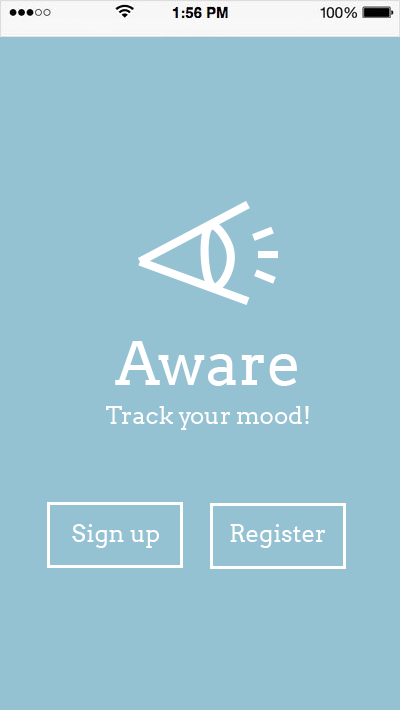
<style>
.page{position:relative;width:400px;height:710px;background:#95c2d3}
.page>*{position:absolute;margin:0}
.t1{font:60px "Arvo";color:#ffffff}
.t2{font:24px "Arvo";color:#ffffff}
.t3{font:18px "Arvo";color:#ffffff}
</style>
<div class="page">
<p class="t1" style="left:115px;top:341px;width:182px;height:45px">Aware</p>
<p class="t2" style="left:106px;top:406px;width:203px;height:24px"><span class="t3"> </span>Track your mood!</p>
<p class="t2" style="left:72px;top:524px;width:87px;height:24px">Sign up</p>
<p class="t2" style="left:230px;top:524px;width:95px;height:24px">Register</p>
</div>
